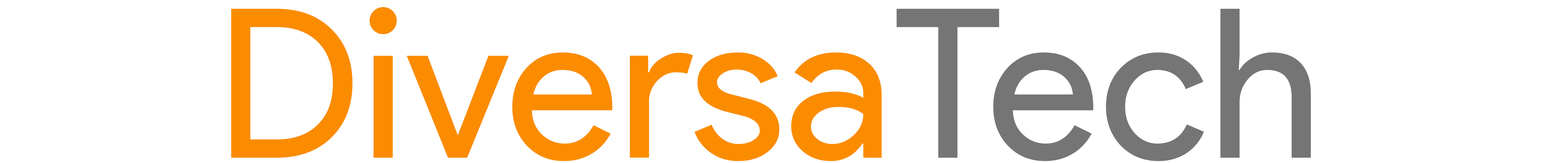
<style>
.page{position:relative;width:1568px;height:163px;background:#ffffff}
.page>*{position:absolute;margin:0}
.t1{font:208.2px "ProductSans-Regular";color:#fb8c00}
.t2{font:208.2px "ProductSans-Regular";color:#757575}
</style>
<div class="page">
<p class="t1" style="left:231px;top:7px;width:1080px;height:155px">Diversa<span class="t2">Tech</span></p>
</div>
